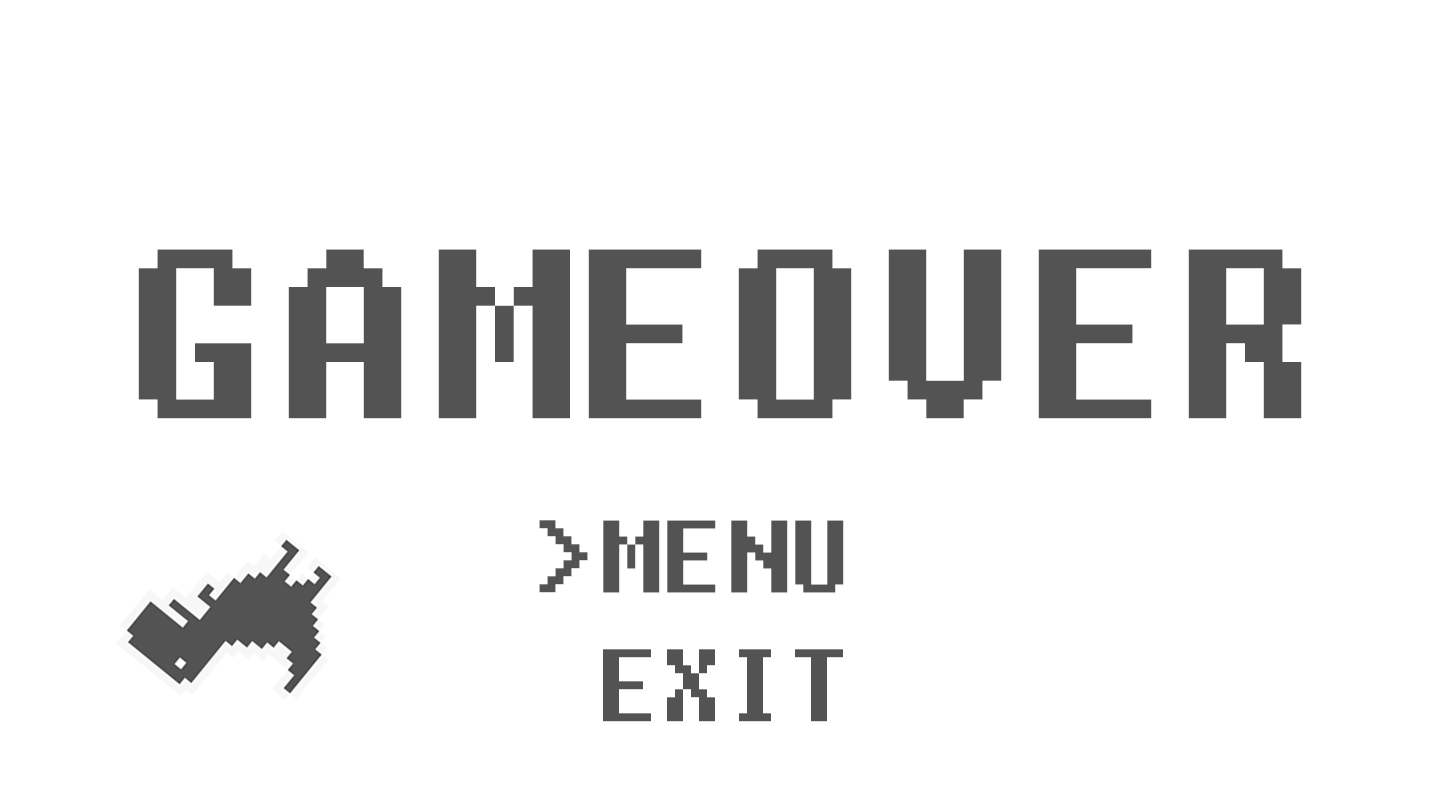
<style>
.page{position:relative;width:1440px;height:810px;background:#ffffff}
.page>*{position:absolute;margin:0}
.t1{font:300px "Fixedsys";color:#535353}
.t2{font:128px "Fixedsys";color:#535353}
</style>
<div class="page">
<p class="t1" style="left:138px;top:249px;width:1164px;height:170px">GAMEOVER</p>
<p class="t2" style="left:539px;top:520px;width:49px;height:73px">&gt;</p>
<p class="t2" style="left:603px;top:520px;width:241px;height:73px">MENU</p>
<p class="t2" style="left:603px;top:649px;width:240px;height:73px">EXIT</p>
</div>
